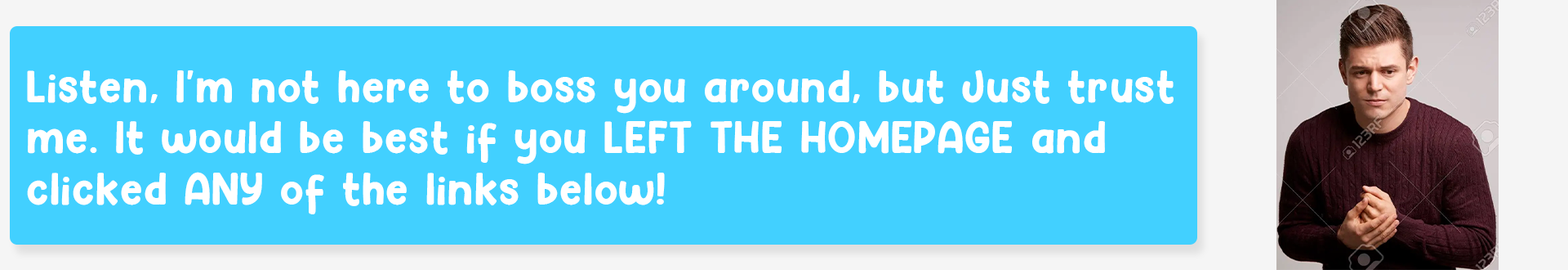
<style>
.page{position:relative;width:1568px;height:270px;background:#42d0ff}
.page>*{position:absolute;margin:0}
.t1{font:42.5px "Hey-Comic";letter-spacing:0.025em;color:#ffffff}
</style>
<div class="page">
<p class="t1" style="left:27px;top:69px;width:1147px;height:145px">Listen, I'm not here to boss you around, but Just trust me. It would be best if you LEFT THE HOMEPAGE and clicked ANY of the links below!</p>
</div>
